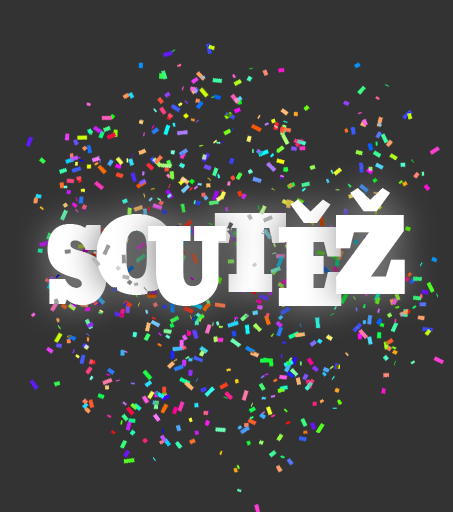
<style>
.page{position:relative;width:453px;height:512px;background:#333333}
.page>*{position:absolute;margin:0}
.t1{font:99.6px "Bevan";color:#ffffff;text-transform:uppercase}
.t2{font:99.6px "Bauhaus93";color:#ffffff;text-transform:uppercase}
</style>
<div class="page">
<p class="t1" style="left:336px;top:188px;width:69px;height:106px">ž</p>
<p class="t1" style="left:278px;top:199px;width:64px;height:107px">ě</p>
<p class="t1" style="left:96px;top:214px;width:81px;height:81px">o</p>
<p class="t1" style="left:214px;top:213px;width:72px;height:79px">T</p>
<p class="t1" style="left:47px;top:224px;width:60px;height:81px"><span class="t2"><br></span>S</p>
<p class="t1" style="left:148px;top:226px;width:78px;height:80px">u</p>
</div>
